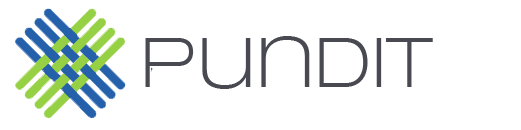
<style>
.page{position:relative;width:521px;height:130px;background:#ffffff}
.page>*{position:absolute;margin:0}
.t1{font:96px "Lowvetica";color:#484951}
</style>
<div class="page">
<p class="t1" style="left:145px;top:36px;width:288px;height:53px">pundit</p>
</div>
